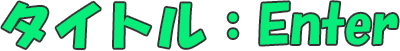
<style>
.page{position:relative;width:400px;height:51px;background:#ffffff}
.page>*{position:absolute;margin:0}
.t1{font:51.7px "HGSSoeiKakupoptai";color:#07ed79}
</style>
<div class="page">
<p class="t1" style="left:2px;top:2px;width:396px;height:46px">タイトル：Enter</p>
</div>
